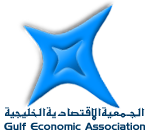
<style>
.page{position:relative;width:148px;height:135px;background:#ffffff}
.page>*{position:absolute;margin:0}
.t1{font:14.1px/14.1px "MCS-Kufy-madany-S_U-normal.";color:#003863}
.t2{font:10.5px/14.1px "Denmark";color:#003863}
</style>
<div class="page">
<p class="t1" style="left:4px;top:106px;width:141px;height:24px;text-align:center">الجــمعية الاقتصادية الخليجية<br><span class="t2">Gulf Economic Association</span></p>
</div>
